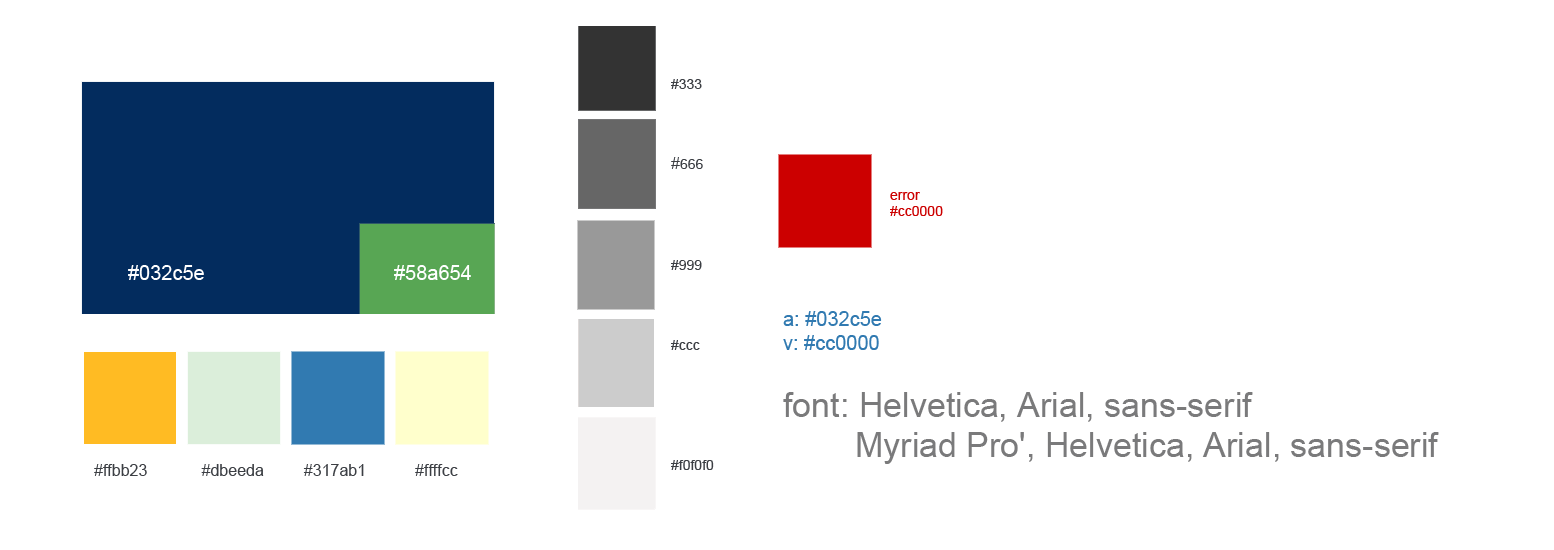
<style>
.page{position:relative;width:1554px;height:550px;background:#ffffff}
.page>*{position:absolute;margin:0}
.t1{font:14px/40px "ArialMT";color:#3c3f44}
.t2{font:16px/40px "ArialMT";color:#3c3f44}
.t3{font:14px/16px "ArialMT";color:#cc0000}
.t4{font:20px "ArialMT";color:#ffffff}
.t5{font:20px/24px "ArialMT";color:#317ab1}
.t6{font:34px/40px "ArialMT";color:#7a7a7b}
.t7{font:16px "ArialMT";color:#3c3f44}
</style>
<div class="page">
<p class="t1" style="left:671px;top:79px;width:32px;height:90px">#333<br><span class="t2"><br>#</span>666</p>
<p class="t3" style="left:890px;top:192px;width:53px;height:24px">error<br>#cc0000</p>
<p class="t4" style="left:128px;top:265px;width:76px;height:15px">#032c5e</p>
<p class="t4" style="left:394px;top:265px;width:77px;height:15px">#58a654</p>
<p class="t1" style="left:671px;top:260px;width:43px;height:210px">#999<br><br>#ccc<br><br><br>#f0f0f0</p>
<p class="t5" style="left:783px;top:311px;width:99px;height:39px">a: #032c5e<br>v: #cc0000</p>
<p class="t6" style="left:783px;top:392px;width:656px;height:72px">font: Helvetica, Arial, sans-serif<br>  Myriad Pro', Helvetica, Arial, sans-serif</p>
<p class="t7" style="left:94px;top:464px;width:364px;height:12px">#ffbb23         #dbeeda         #317ab1           #ffffcc</p>
</div>
